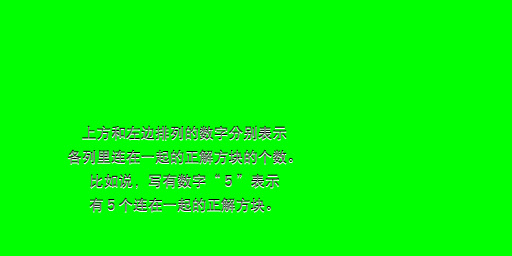
<style>
.page{position:relative;width:512px;height:256px;background:#00ff00}
.page>*{position:absolute;margin:0}
.t1{font:14.7px/24px "DFPHeiW5-GB"}
</style>
<div class="page">
<p class="t1" style="left:67px;top:125px;width:226px;height:87px;text-align:center">上方和左边排列的数字分别表示<br>各列里连在一起的正解方块的个数。<br>比如说，写有数字“５”表示<br>有５个连在一起的正解方块。</p>
</div>
